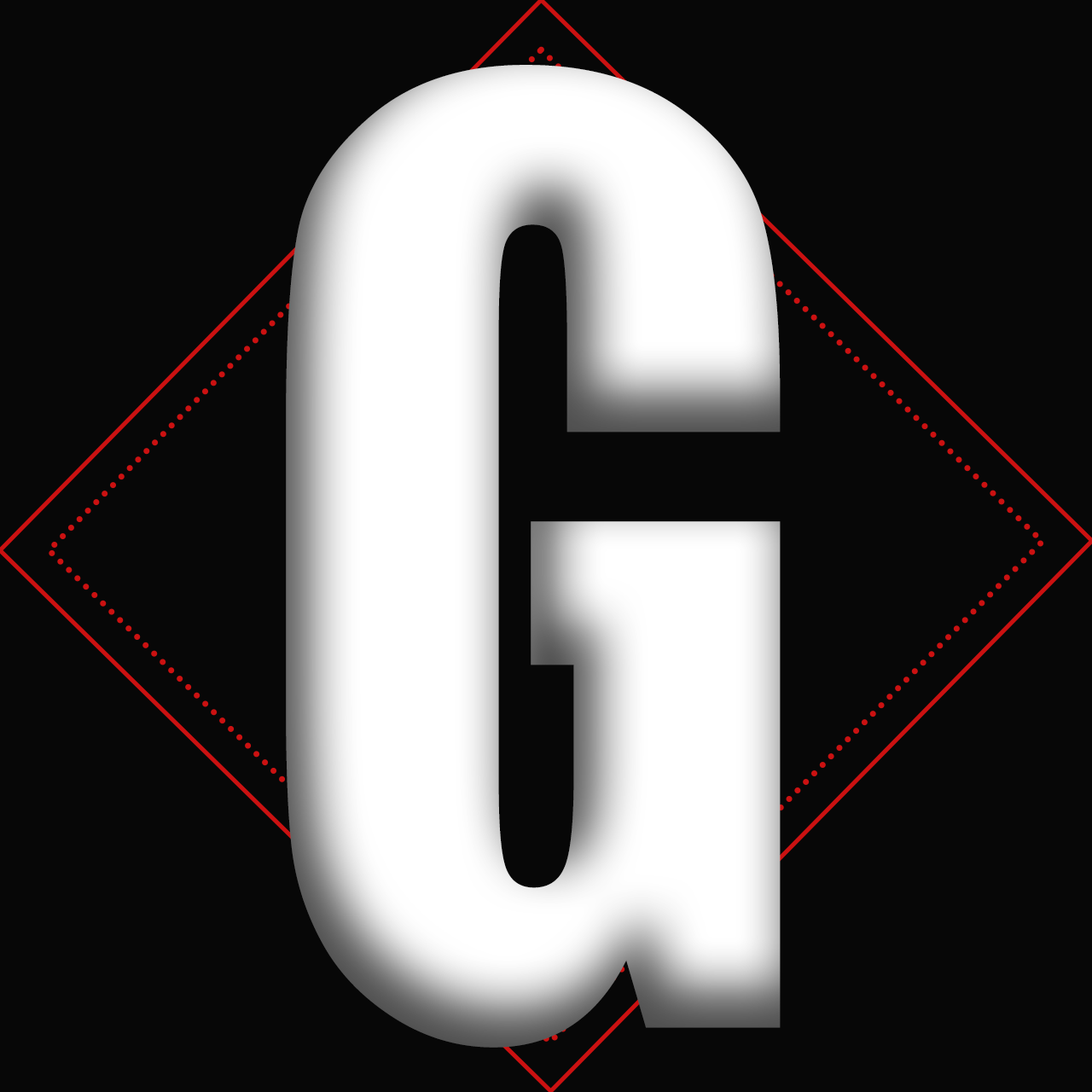
<style>
.page{position:relative;width:1092px;height:1092px;background:#070707}
.page>*{position:absolute;margin:0}
.t1{font:1192.5px "Impact";letter-spacing:0.1em;color:#ffffff;scale:0.87 1}
</style>
<div class="page">
<p class="t1" style="left:286px;top:65px;width:495px;height:983px">G</p>
</div>
